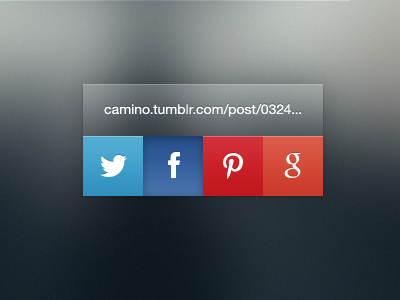
<style>
.page{position:relative;width:400px;height:300px}
.page>*{position:absolute;margin:0}
.t1{font:13.2px "HelveticaNeue";letter-spacing:0.003em;color:#ffffff;scale:1.06 1}
.t2{font:13.2px "HelveticaNeue";color:#ffffff;scale:1.06 1}
.t3{font:13.2px "Cabin-Regular";color:#ffffff;scale:1.06 1}
</style>
<div class="page">
<p class="t1" style="left:104px;top:104px;width:197px;height:13px">camino.tumblr.com/post/0324...<span class="t2">2</span><span class="t3">10412</span></p>
</div>
